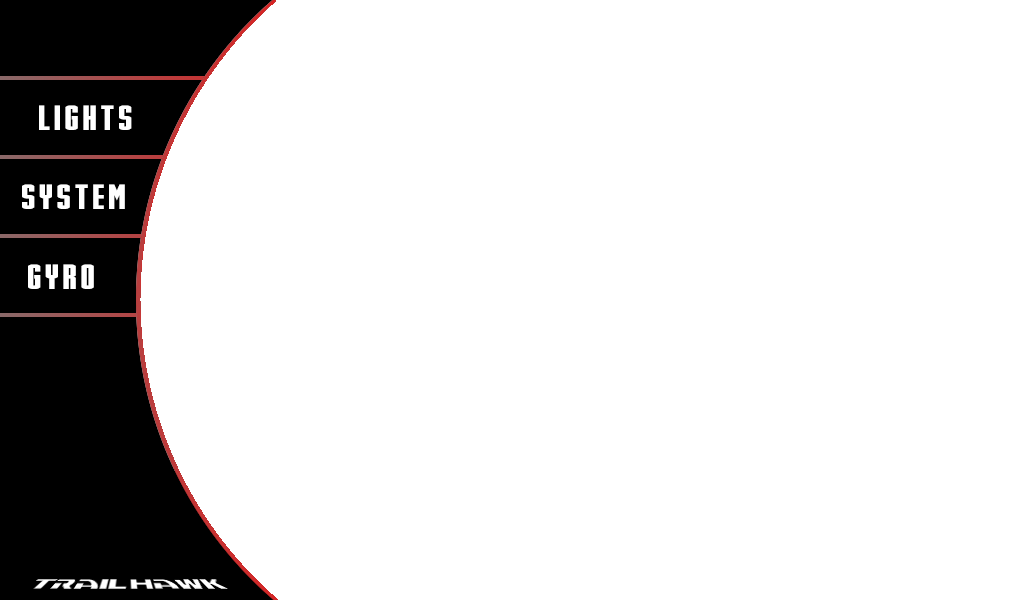
<style>
.page{position:relative;width:1024px;height:600px;background:#ffffff}
.page>*{position:absolute;margin:0}
.t1{font:36px "Stark";letter-spacing:0.05em;color:#ffffff;text-transform:uppercase}
</style>
<div class="page">
<p class="t1" style="left:39px;top:105px;width:93px;height:25px">Lights</p>
<p class="t1" style="left:22px;top:184px;width:103px;height:25px">System</p>
<p class="t1" style="left:28px;top:264px;width:66px;height:25px">Gyro</p>
</div>
